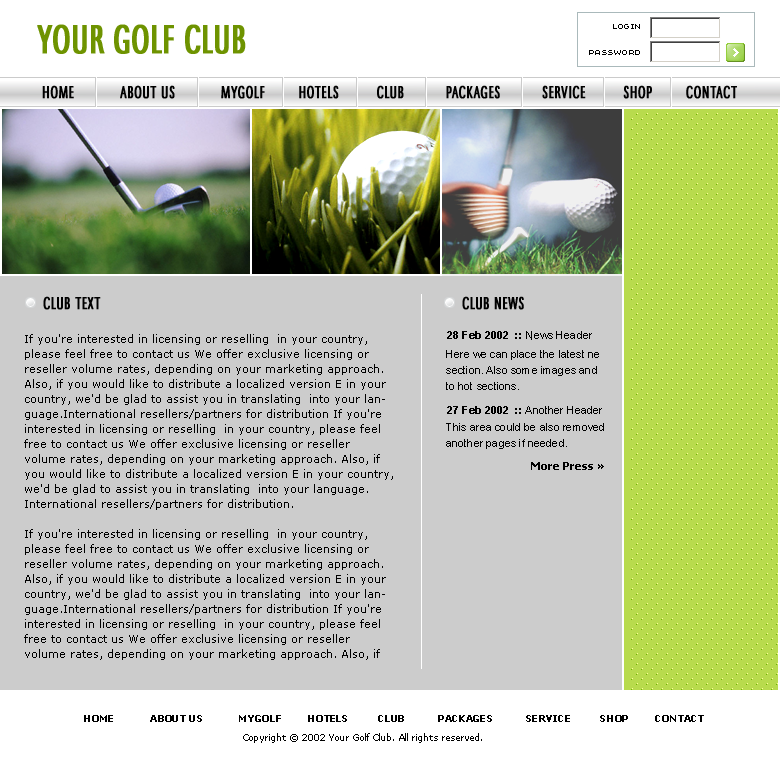
<style>
.page{position:relative;width:780px;height:764px;background:#cccccc}
.page>*{position:absolute;margin:0}
.t1{font:42px "MaximaCyrTCY-LighComp";color:#6e9300;font-weight:bold}
.t2{font:18px "MaximaCyrTCY-LighComp";letter-spacing:0.02em;color:#000000;font-weight:bold}
.t3{font:11px/15px "Verdana";color:#000000}
.t4{font:11px/15px "Verdana";color:#ffffff}
.t5{font:9px "Verdana-Bold";letter-spacing:0.02em;color:#000000}
.t6{font:9px "Verdana";color:#000000}
</style>
<div class="page">
<p class="t1" style="left:37px;top:24px;width:209px;height:30px">YOUR GOLF CLUB</p>
<p class="t2" style="left:42px;top:85px;width:695px;height:14px">HOME           ABOUT US           MYGOLF        HOTELS         CLUB          PACKAGES          SERVICE         SHOP        CONTACT</p>
<p class="t2" style="left:43px;top:296px;width:58px;height:14px">CLUB TEXT</p>
<p class="t2" style="left:462px;top:296px;width:62px;height:14px">CLUB NEWS</p>
<p class="t3" style="left:24px;top:334px;width:369px;height:326px"><span class="t4"><br></span>If you're interested in licensing or reselling  in your country, please feel free to contact us We offer exclusive licensing or reseller volume rates, depending on your marketing approach. Also, if you would like to distribute a localized version E in your country, we'd be glad to assist you in translating  into your language.International resellers/partners for distribution If you're interested in licensing or reselling  in your country, please feel free to contact us We offer exclusive licensing or reseller volume rates, depending on your marketing approach. Also, if you would like to distribute a localized version E in your country, we'd be glad to assist you in translating  into your language.International resellers/partners for distribution.<br><br>If you're interested in licensing or reselling  in your country, please feel free to contact us We offer exclusive licensing or reseller volume rates, depending on your marketing approach. Also, if you would like to distribute a localized version E in your country, we'd be glad to assist you in translating  into your language.International resellers/partners for distribution If you're interested in licensing or reselling  in your country, please feel free to contact us We offer exclusive licensing or reseller volume rates, depending on your marketing approach. Also, if you would like to distribute a localized version E in your country, we'd be glad to assist you in translating  into your language.International resellers/partners for distribution</p>
<p class="t5" style="left:84px;top:715px;width:620px;height:7px">HOME           ABOUT US           MYGOLF        HOTELS         CLUB          PACKAGES          SERVICE         SHOP        CONTACT</p>
<p class="t6" style="left:243px;top:733px;width:239px;height:10px">Copyright © 2002 Your Golf Club. All rights reserved.</p>
</div>
